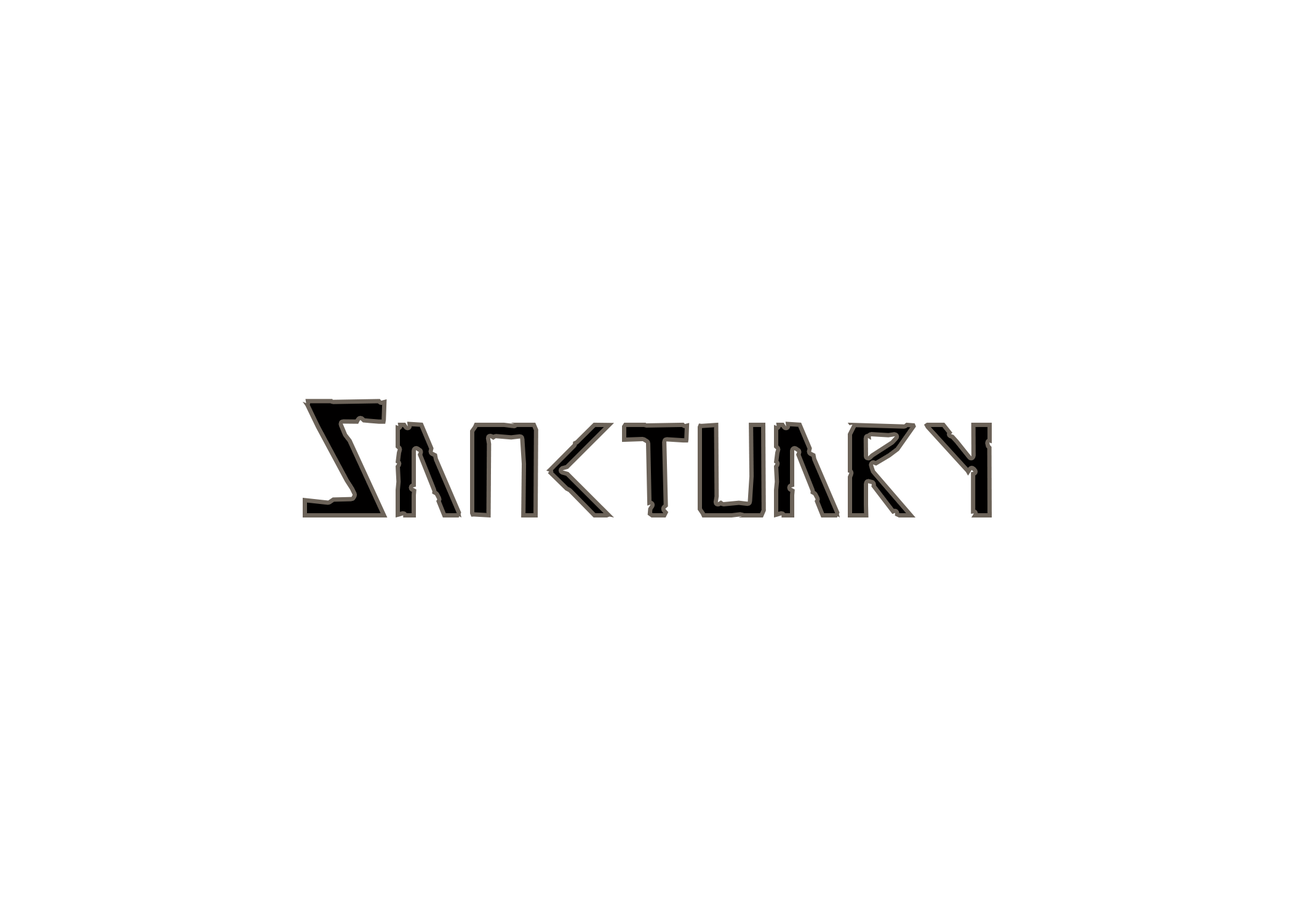
<style>
.page{position:relative;width:1292px;height:923px;background:#ffffff}
.page>*{position:absolute;margin:0}
.t1{font:167.5px "Anglorunic"}
</style>
<div class="page">
<p class="t1" style="left:303px;top:399px;width:689px;height:118px">Sanctuary</p>
</div>
